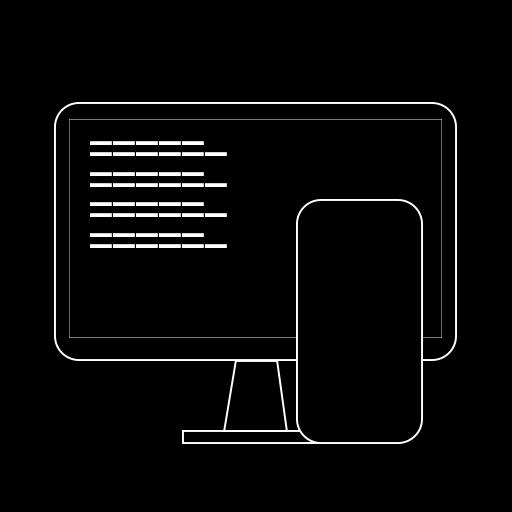
<style>
.page{position:relative;width:512px;height:512px;background:#000000}
.page>*{position:absolute;margin:0}
.t1{font:50px "FiraSansCondensed-Regular";color:#ffffff}
</style>
<div class="page">
<p class="t1" style="left:90px;top:141px;width:114px;height:4px">_____</p>
<p class="t1" style="left:90px;top:152px;width:137px;height:4px">______</p>
<p class="t1" style="left:90px;top:172px;width:114px;height:4px">_____</p>
<p class="t1" style="left:90px;top:183px;width:137px;height:4px">______</p>
<p class="t1" style="left:90px;top:202px;width:114px;height:4px">_____</p>
<p class="t1" style="left:90px;top:213px;width:137px;height:4px">______</p>
<p class="t1" style="left:90px;top:233px;width:114px;height:4px">_____</p>
<p class="t1" style="left:90px;top:244px;width:137px;height:4px">______</p>
</div>
